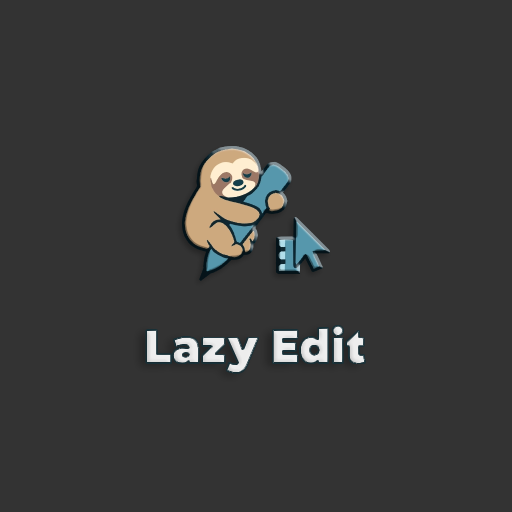
<style>
.page{position:relative;width:512px;height:512px;background:#333333}
.page>*{position:absolute;margin:0}
.t1{font:45px "FONTSPRINGDEMO-AftikaBlackRegular";color:#ededed}
</style>
<div class="page">
<p class="t1" style="left:146px;top:325px;width:220px;height:48px">Lazy Edit</p>
</div>
